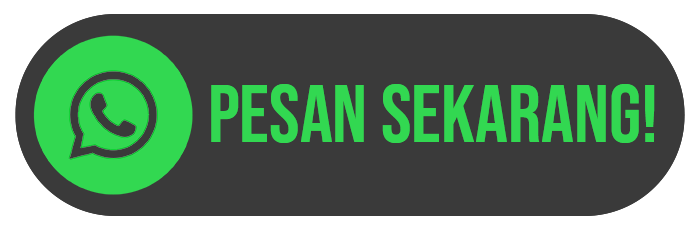
<style>
.page{position:relative;width:700px;height:230px;background:#3a3a3a}
.page>*{position:absolute;margin:0}
.t1{font:82px "BebasNeue-Regular";color:#32d851}
</style>
<div class="page">
<p class="t1" style="left:211px;top:84px;width:444px;height:59px">Pesan sekarang!</p>
</div>
